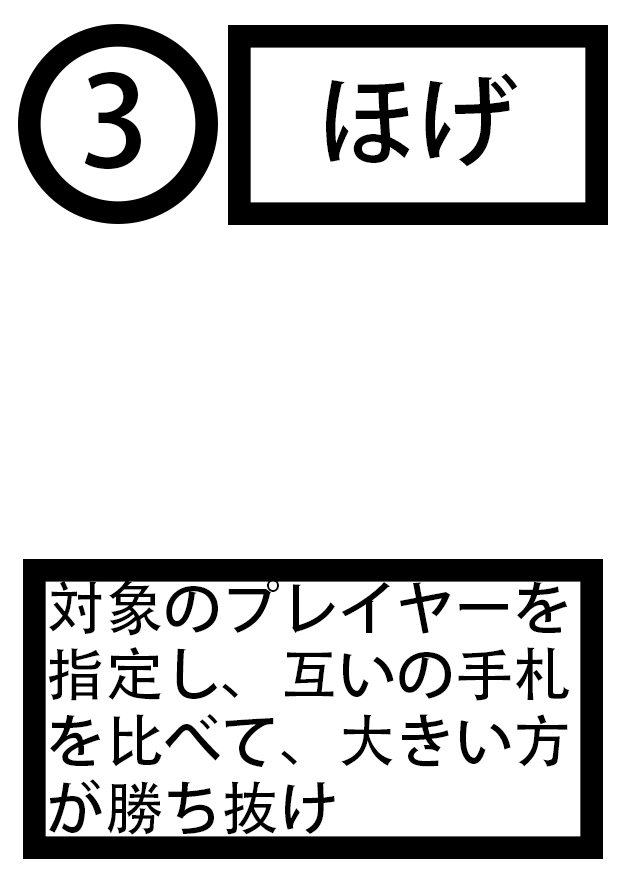
<style>
.page{position:relative;width:625px;height:875px;background:#ffffff}
.page>*{position:absolute;margin:0}
.t1{font:125px "AdobeHeitiStd-Regular";color:#000000}
.t2{font:100px "AdobeHeitiStd-Regular";color:#000000}
.t3{font:58.3px/66.7px "AdobeHeitiStd-Regular";color:#000000}
</style>
<div class="page">
<p class="t1" style="left:84px;top:71px;width:57px;height:99px">3</p>
<p class="t2" style="left:326px;top:73px;width:192px;height:94px">ほげ</p>
<p class="t3" style="left:48px;top:579px;width:521px;height:256px">対象のプレイヤーを指定し、互いの手札を比べて、大きい方が勝ち抜け</p>
</div>
